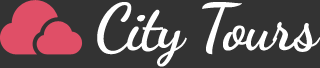
<style>
.page{position:relative;width:320px;height:68px;background:#333333}
.page>*{position:absolute;margin:0}
.t1{font:64.5px "DancingScript-Bold";letter-spacing:-0.025em;color:#ffffff}
</style>
<div class="page">
<p class="t1" style="left:97px;top:2px;width:224px;height:65px">City Tours</p>
</div>
